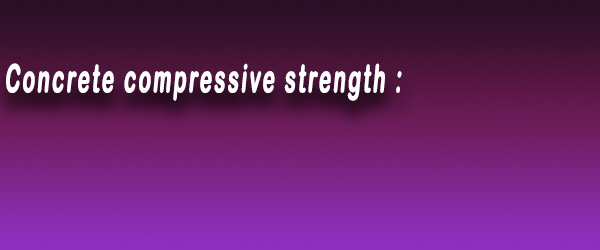
<style>
.page{position:relative;width:600px;height:250px}
.page>*{position:absolute;margin:0}
.t1{font:38.5px "ArialRoundedMTBold";letter-spacing:0.1em;color:#ffffff;font-weight:bold;font-style:italic;scale:0.52 1}
</style>
<div class="page">
<p class="t1" style="left:6px;top:63px;width:396px;height:38px">Concrete compressive strength :</p>
</div>
